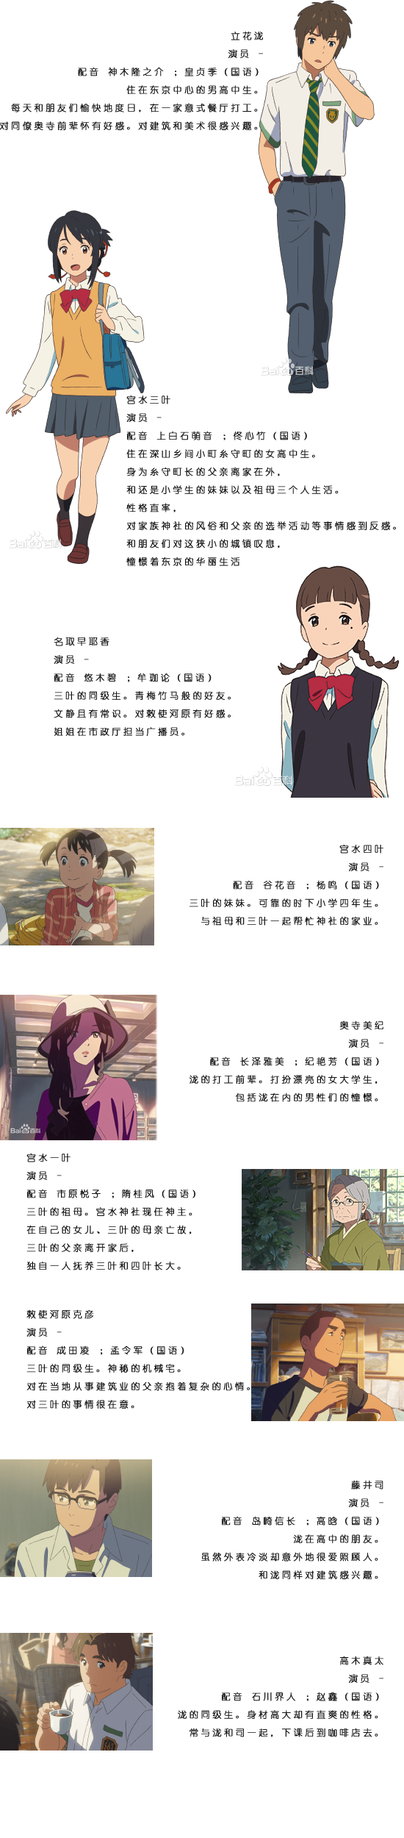
<style>
.page{position:relative;width:404px;height:1838px;background:#ffffff}
.page>*{position:absolute;margin:0}
.t1{font:9px/18px "YouYuan";letter-spacing:0.26em;color:#131313;font-weight:bold}
</style>
<div class="page">
<p class="t1" style="left:0px;top:31px;width:263px;height:99px;text-align:right">立花泷<br>演员 -<br>配音 神木隆之介 ；皇贞季（国语）<br>住在东京中心的男高中生。<br>每天和朋友们愉快地度日，在一家意式餐厅打工。<br>对同僚奥寺前辈怀有好感。对建筑和美术很感兴趣。</p>
<p class="t1" style="left:126px;top:395px;width:270px;height:171px">宫水三叶<br>演员 -<br>配音 上白石萌音 ；佟心竹（国语）<br>住在深山乡间小町糸守町的女高中生。<br>身为糸守町长的父亲离家在外，<br>和还是小学生的妹妹以及祖母三个人生活。<br>性格直率，<br>对家族神社的风俗和父亲的选举活动等事情感到反感。<br>和朋友们对这狭小的城镇叹息，<br>憧憬着东京的华丽生活</p>
<p class="t1" style="left:54px;top:637px;width:177px;height:99px">名取早耶香<br>演员 -<br>配音 悠木碧 ；牟珈论（国语）<br>三叶的同级生。青梅竹马般的好友。<br>文静且有常识。对敕使河原有好感。<br>姐姐在市政厅担当广播员。</p>
<p class="t1" style="left:190px;top:844px;width:194px;height:82px;text-align:right">宫水四叶<br>演员 -<br>配音 谷花音 ；杨鸣（国语）<br>三叶的妹妹。可靠的时下小学四年生。<br>与祖母和三叶一起帮忙神社的家业。</p>
<p class="t1" style="left:189px;top:1021px;width:195px;height:81px;text-align:right">奥寺美纪<br>演员 -<br>配音 长泽雅美 ；纪艳芳（国语）<br>泷的打工前辈。打扮漂亮的女大学生，<br>包括泷在内的男性们的憧憬。</p>
<p class="t1" style="left:26px;top:1153px;width:170px;height:118px">宫水一叶<br>演员 -<br>配音 市原悦子 ；隋桂凤（国语）<br>三叶的祖母。宫水神社现任神主。<br>在自己的女儿、三叶的母亲亡故，<br>三叶的父亲离开家后，<br>独自一人抚养三叶和四叶长大。</p>
<p class="t1" style="left:26px;top:1309px;width:224px;height:100px">敕使河原克彦<br>演员 -<br>配音 成田凌 ；孟令军（国语）<br>三叶的同级生。神秘的机械宅。<br>对在当地从事建筑业的父亲抱着复杂的心情。<br>对三叶的事情很在意。</p>
<p class="t1" style="left:201px;top:1480px;width:183px;height:99px;text-align:right">藤井司<br>演员 -<br>配音 岛崎信长 ；高晗（国语）<br>泷在高中的朋友。<br>虽然外表冷淡却意外地很爱照顾人。<br>和泷同样对建筑感兴趣。</p>
<p class="t1" style="left:178px;top:1656px;width:206px;height:81px;text-align:right">高木真太<br>演员 -<br>配音 石川界人 ；赵鑫（国语）<br>泷的同级生。身材高大却有直爽的性格。<br>常与泷和司一起，下课后到咖啡店去。</p>
</div>
